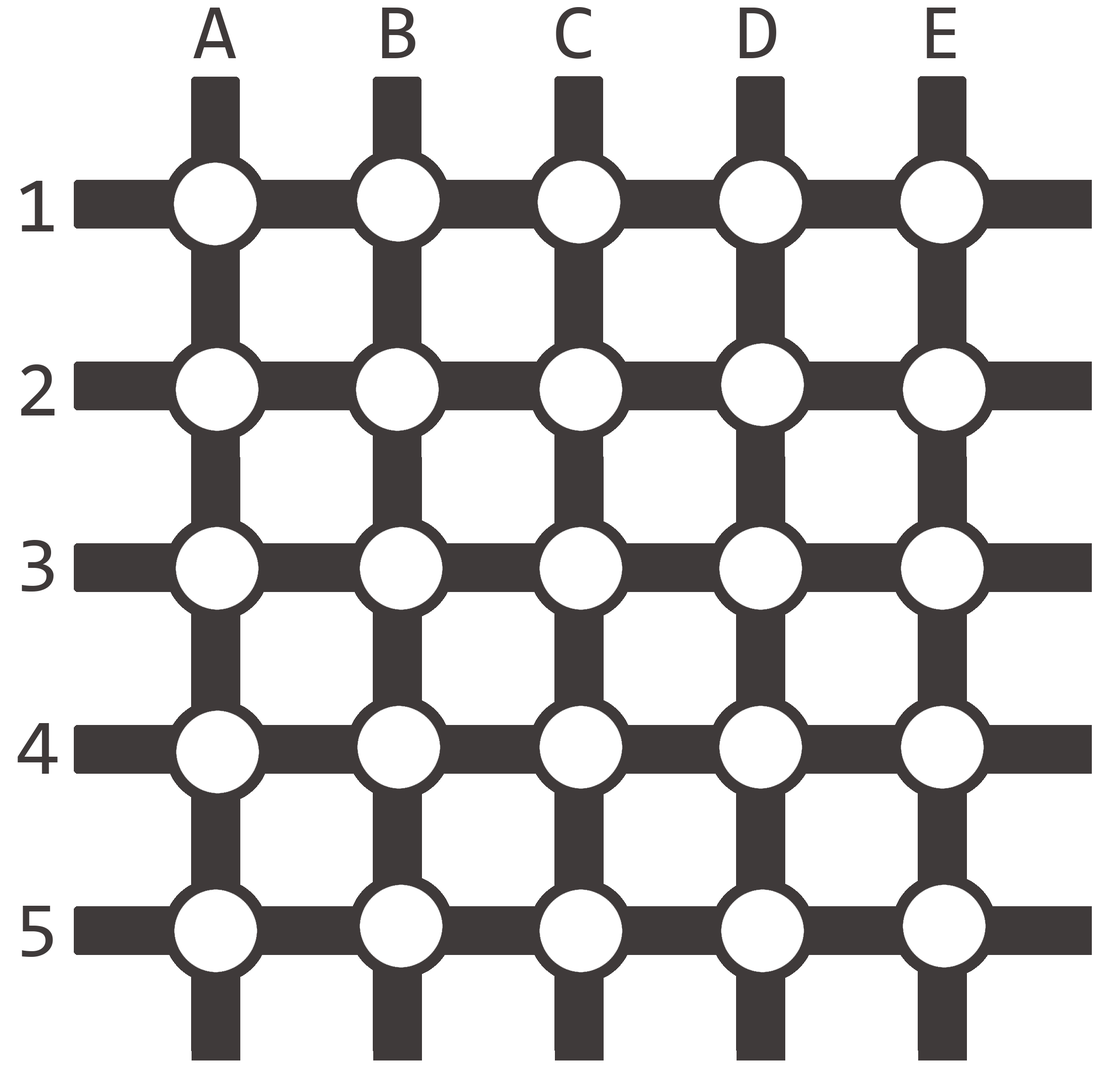
<style>
.page{position:relative;width:1106px;height:1078px;background:#ffffff}
.page>*{position:absolute;margin:0}
.t1{font:78.9px "Consolas";color:#3f3a3a}
</style>
<div class="page">
<p class="t1" style="left:193px;top:8px;width:43px;height:50px">A</p>
<p class="t1" style="left:382px;top:8px;width:33px;height:50px">B</p>
<p class="t1" style="left:556px;top:7px;width:35px;height:52px">C</p>
<p class="t1" style="left:740px;top:8px;width:36px;height:50px">D</p>
<p class="t1" style="left:927px;top:8px;width:29px;height:50px">E</p>
<p class="t1" style="left:20px;top:181px;width:34px;height:50px">1</p>
<p class="t1" style="left:21px;top:364px;width:34px;height:51px">2</p>
<p class="t1" style="left:22px;top:540px;width:32px;height:51px">3</p>
<p class="t1" style="left:18px;top:723px;width:40px;height:51px">4</p>
<p class="t1" style="left:22px;top:906px;width:31px;height:51px">5</p>
</div>
